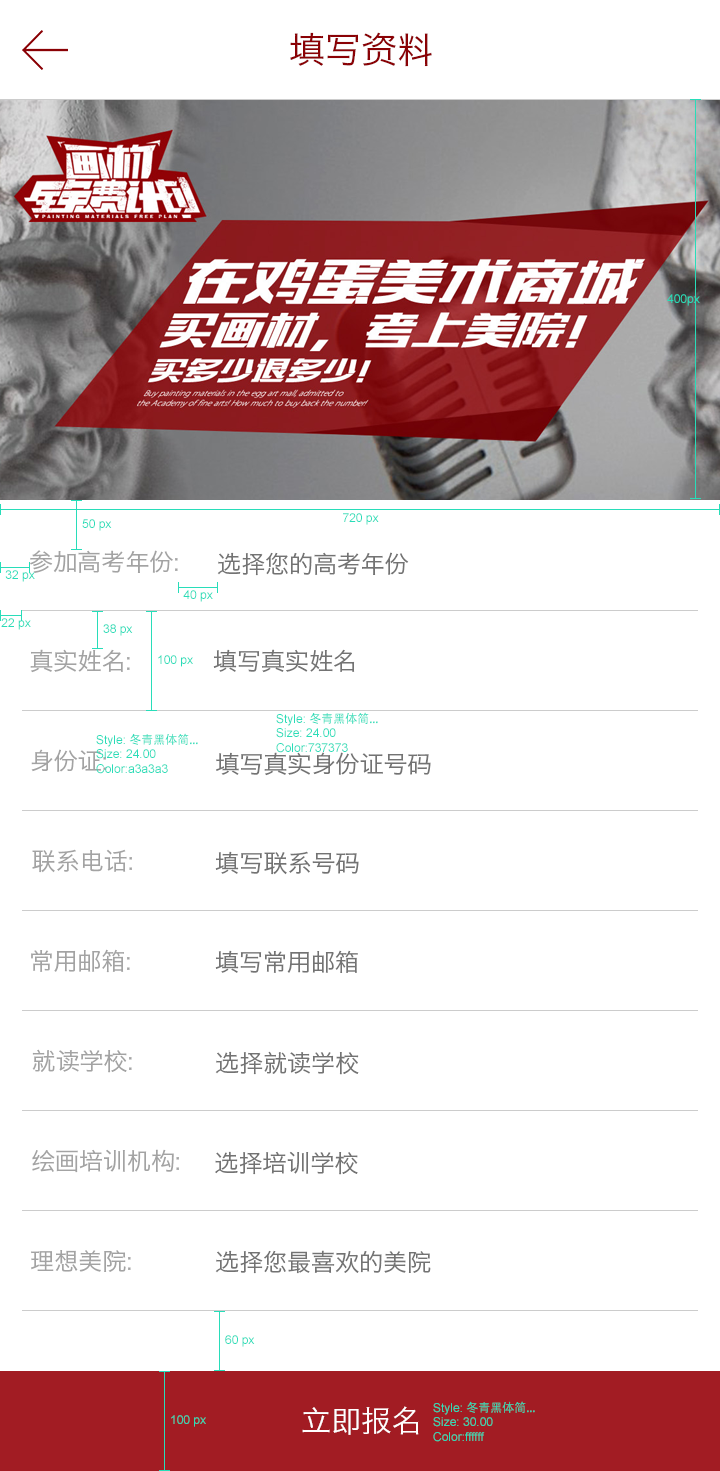
<style>
.page{position:relative;width:720px;height:1471px;background:#ffffff}
.page>*{position:absolute;margin:0}
.t1{font:36px "HiraginoSansGB-W3";color:#8a0105}
.t2{font:12px "ArialMT";color:#28ddb9}
.t3{font:24px "HiraginoSansGB-W3";color:#a3a3a3}
.t4{font:24px "HiraginoSansGB-W3";color:#737373}
.t5{font:12px "AdobeHeitiStd-Regular";color:#28ddb9}
.t6{font:30px "HiraginoSansGB-W3";color:#ffffff}
</style>
<div class="page">
<p class="t1" style="left:290px;top:32px;width:142px;height:35px">填写资料</p>
<p class="t2" style="left:667px;top:294px;width:33px;height:12px">400px</p>
<p class="t2" style="left:82px;top:519px;width:30px;height:12px">50 px</p>
<p class="t2" style="left:343px;top:513px;width:36px;height:12px">720 px</p>
<p class="t3" style="left:30px;top:550px;width:148px;height:23px">参加高考年份:</p>
<p class="t4" style="left:217px;top:552px;width:192px;height:24px">选择您的高考年份</p>
<p class="t2" style="left:5px;top:570px;width:30px;height:12px">32 px</p>
<p class="t2" style="left:183px;top:590px;width:30px;height:12px">40 px</p>
<p class="t2" style="left:1px;top:618px;width:30px;height:12px">22 px</p>
<p class="t2" style="left:103px;top:624px;width:30px;height:12px">38 px</p>
<p class="t3" style="left:30px;top:649px;width:100px;height:24px">真实姓名:</p>
<p class="t4" style="left:213px;top:649px;width:142px;height:24px">填写真实姓名</p>
<p class="t2" style="left:158px;top:655px;width:35px;height:12px">100 px</p>
<p class="t2" style="left:276px;top:712px;width:102px;height:41px">Style: <span class="t5">冬青黑体简...<br></span>Size: 24.00<br>Color:737373</p>
<p class="t2" style="left:96px;top:733px;width:102px;height:41px">Style: <span class="t5">冬青黑体简...<br></span>Size: 24.00<br>Color:a3a3a3</p>
<p class="t3" style="left:31px;top:749px;width:75px;height:23px">身份证:</p>
<p class="t4" style="left:216px;top:752px;width:215px;height:24px">填写真实身份证号码</p>
<p class="t3" style="left:32px;top:849px;width:100px;height:24px">联系电话:</p>
<p class="t4" style="left:215px;top:851px;width:144px;height:24px">填写联系号码</p>
<p class="t3" style="left:31px;top:949px;width:99px;height:24px">常用邮箱:</p>
<p class="t4" style="left:215px;top:950px;width:143px;height:23px">填写常用邮箱</p>
<p class="t3" style="left:32px;top:1049px;width:100px;height:24px">就读学校:</p>
<p class="t4" style="left:215px;top:1051px;width:144px;height:24px">选择就读学校</p>
<p class="t3" style="left:32px;top:1149px;width:147px;height:24px">绘画培训机构:</p>
<p class="t4" style="left:215px;top:1151px;width:143px;height:24px">选择培训学校</p>
<p class="t3" style="left:31px;top:1250px;width:100px;height:22px">理想美院:</p>
<p class="t4" style="left:215px;top:1250px;width:216px;height:24px">选择您最喜欢的美院</p>
<p class="t2" style="left:225px;top:1335px;width:30px;height:12px">60 px</p>
<p class="t6" style="left:302px;top:1406px;width:117px;height:29px">立即报名</p>
<p class="t2" style="left:433px;top:1401px;width:102px;height:41px">Style: <span class="t5">冬青黑体简...<br></span>Size: 30.00<br>Color:ffffff</p>
<p class="t2" style="left:171px;top:1415px;width:35px;height:12px">100 px</p>
</div>
